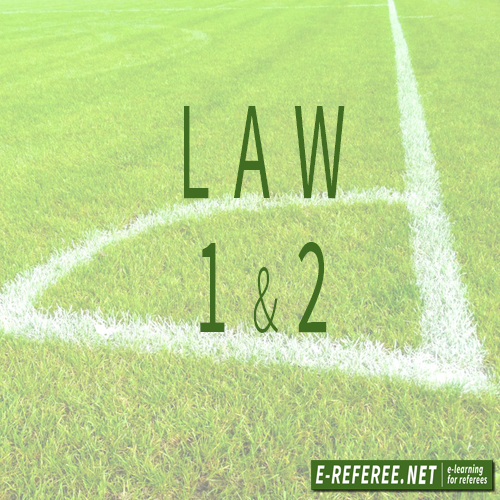
<style>
.page{position:relative;width:500px;height:500px}
.page>*{position:absolute;margin:0}
.t1{font:139.5px/134.2px "SourceSansPro-Regular";letter-spacing:0.36em;color:#416d23;scale:0.48 1}
.t2{font:97.7px/134.2px "SourceSansPro-Light";letter-spacing:0.36em;color:#416d23;scale:0.48 1}
</style>
<div class="page">
<p class="t1" style="left:184px;top:106px;width:161px;height:227px;text-align:center">LAW<br>1<span class="t2">&amp;</span>2</p>
</div>
